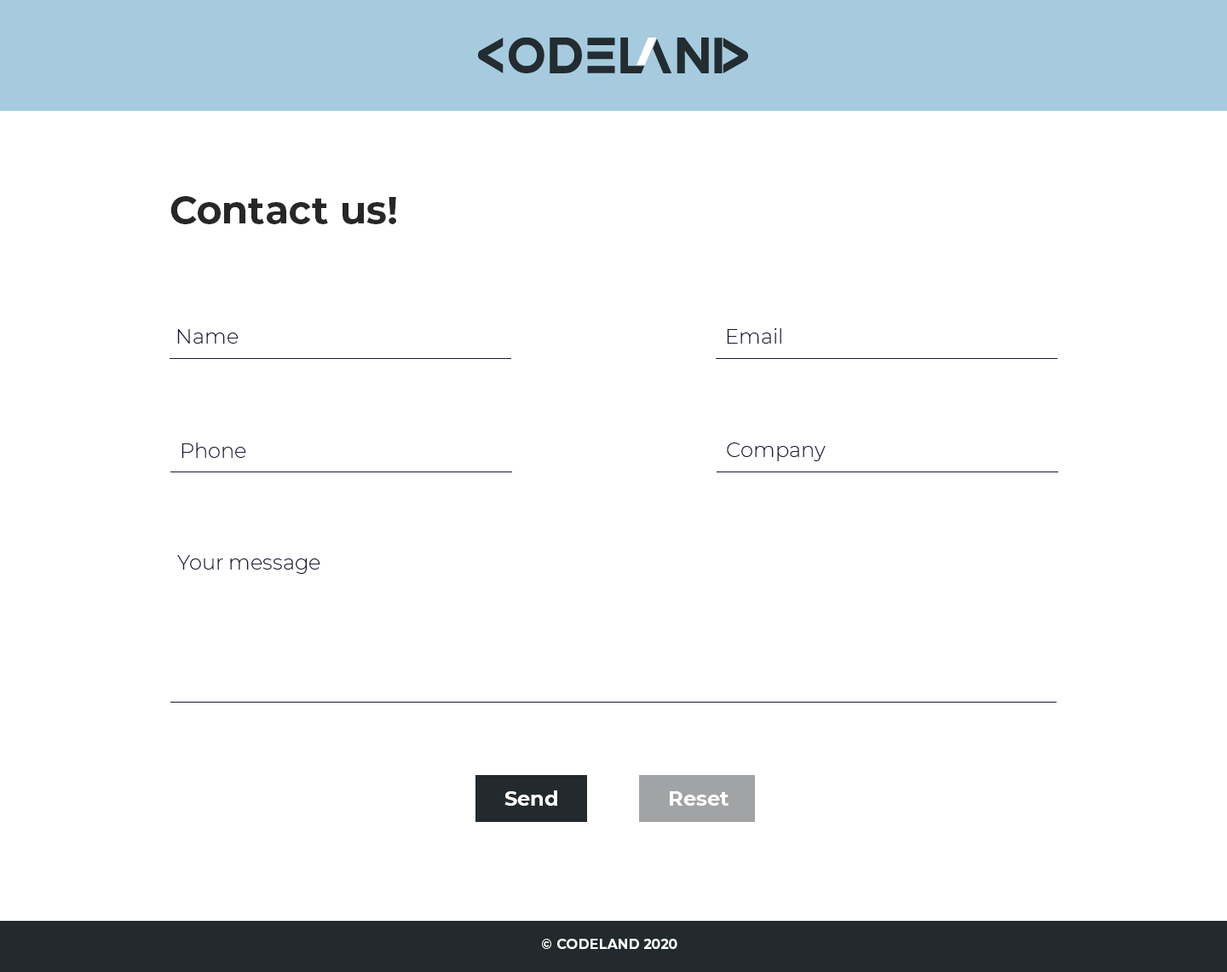
<style>
.page{position:relative;width:1227px;height:972px;background:#ffffff}
.page>*{position:absolute;margin:0}
.t1{font:38.4px "Montserrat-Bold";color:#282728}
.t2{font:20.5px "Montserrat-Light";color:#181932}
.t3{font:20.5px "Montserrat-Bold";color:#ffffff}
.t4{font:13.6px "Montserrat-Bold";color:#ffffff}
</style>
<div class="page">
<p class="t1" style="left:170px;top:196px;width:226px;height:28px">Contact us!</p>
<p class="t2" style="left:177px;top:329px;width:62px;height:14px">Name</p>
<p class="t2" style="left:727px;top:328px;width:55px;height:15px">Email</p>
<p class="t2" style="left:182px;top:442px;width:64px;height:16px">Phone</p>
<p class="t2" style="left:727px;top:442px;width:99px;height:19px">Company</p>
<p class="t2" style="left:177px;top:555px;width:143px;height:19px">Your message</p>
<p class="t3" style="left:505px;top:790px;width:52px;height:15px">Send</p>
<p class="t3" style="left:670px;top:791px;width:60px;height:14px">Reset</p>
<p class="t4" style="left:542px;top:938px;width:136px;height:11px">© CODELAND 2020</p>
</div>
